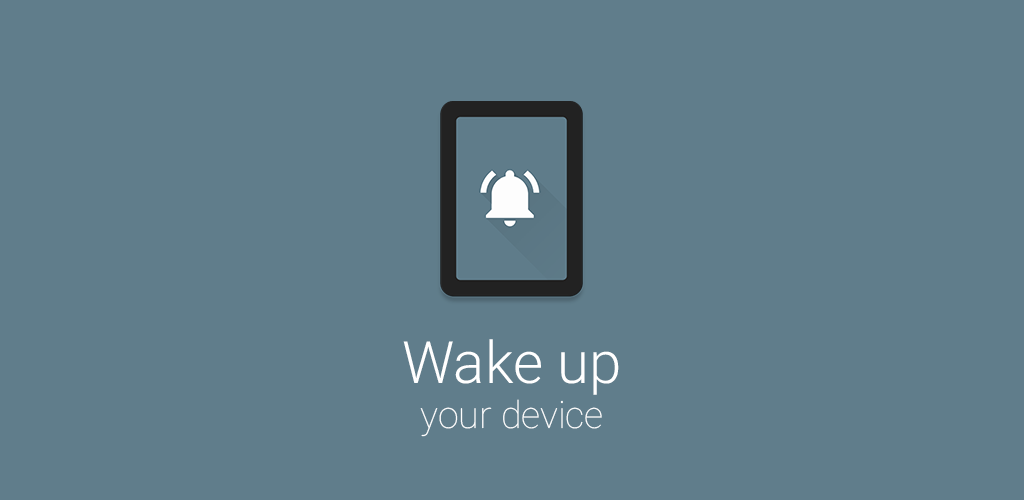
<style>
.page{position:relative;width:1024px;height:500px;background:#607d8b}
.page>*{position:absolute;margin:0}
.t1{font:37.5px "Roboto-Thin";color:#ffffff}
.t2{font:58.3px "Roboto-Light";color:#ffffff}
</style>
<div class="page">
<p class="t1" style="left:403px;top:339px;width:216px;height:98px;text-align:center"><span class="t2">Wake up<br></span>your device</p>
</div>
